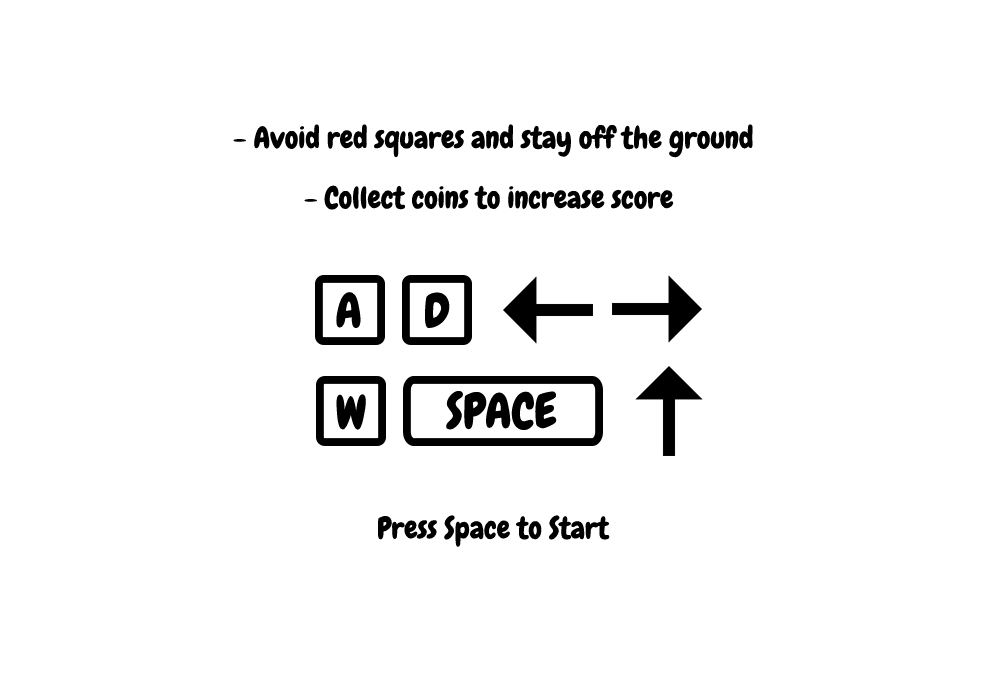
<style>
.page{position:relative;width:1000px;height:700px;background:#ffffff}
.page>*{position:absolute;margin:0}
.t1{font:30px "Chewy";color:#000000}
</style>
<div class="page">
<p class="t1" style="left:233px;top:124px;width:520px;height:34px">- Avoid red squares and stay off the ground</p>
<p class="t1" style="left:304px;top:185px;width:370px;height:25px">- Collect coins to increase score</p>
<p class="t1" style="left:378px;top:515px;width:232px;height:32px">Press Space to Start</p>
</div>
